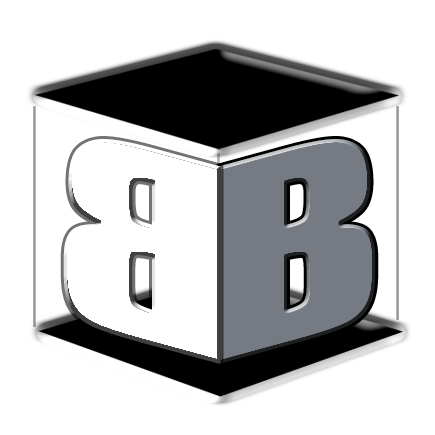
<style>
.page{position:relative;width:435px;height:435px;background:#ffffff}
.page>*{position:absolute;margin:0}
.t1{font:247px "Impact";color:#ffffff;font-weight:bold;scale:1.36 1}
</style>
<div class="page">
<p class="t1" style="left:63px;top:139px;width:158px;height:225px;rotate:-165deg">B</p>
</div>
